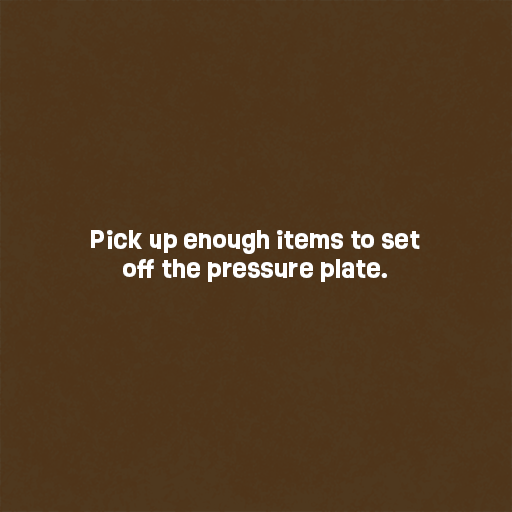
<style>
.page{position:relative;width:512px;height:512px;background:#4f351a}
.page>*{position:absolute;margin:0}
.t1{font:24px "Ruddy-Bold";color:#ffffff}
</style>
<div class="page">
<p class="t1" style="left:91px;top:230px;width:329px;height:52px;text-align:center">Pick up enough items to set<br>off the pressure plate.</p>
</div>
